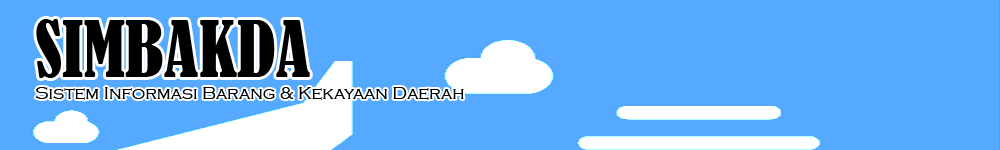
<style>
.page{position:relative;width:1000px;height:150px;background:#55aaff}
.page>*{position:absolute;margin:0}
.t1{font:72px "BernardMT-Condensed";color:#000000}
.t2{font:18px "CopperplateGothic-Light";color:#000000}
</style>
<div class="page">
<p class="t1" style="left:36px;top:19px;width:274px;height:59px">SIMBAKDA</p>
<p class="t2" style="left:35px;top:87px;width:429px;height:13px">Sistem Informasi Barang &amp; Kekayaan Daerah</p>
</div>
